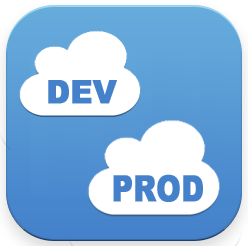
<style>
.page{position:relative;width:248px;height:246px;background:#ffffff}
.page>*{position:absolute;margin:0}
.t1{font:32.2px "Arial-Black";color:#4581cb;font-weight:bold;scale:0.93 1}
.t2{font:35.9px "Arial-Black";color:#4581cb;font-weight:bold;scale:0.81 1}
</style>
<div class="page">
<p class="t1" style="left:48px;top:80px;width:69px;height:24px">DEV</p>
<p class="t2" style="left:113px;top:174px;width:90px;height:28px">PROD</p>
</div>
